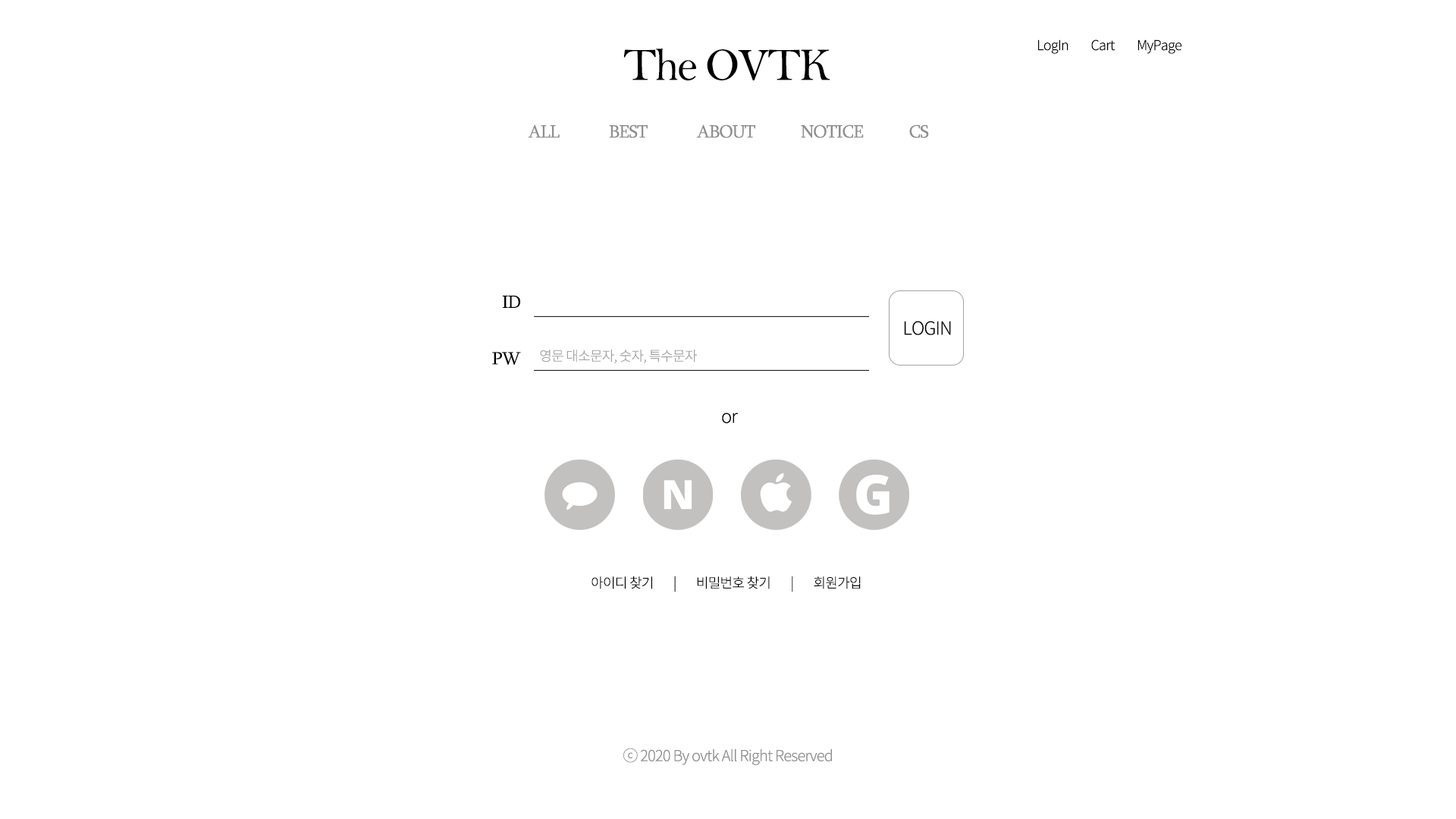
<style>
.page{position:relative;width:1456px;height:819px;background:#ffffff}
.page>*{position:absolute;margin:0}
.t1{font:13.6px "NotoSansKR-Light";letter-spacing:-0.04em;color:#000000}
.t2{font:46.8px "BellMT";letter-spacing:-0.04em;color:#000000}
.t3{font:18.2px "Sylfaen";letter-spacing:-0.04em;color:#8e8e8e}
.t4{font:18.2px "Sylfaen";letter-spacing:-0.04em;color:#000000}
.t5{font:18.2px "NotoSansKR-Light";letter-spacing:-0.04em;color:#000000}
.t6{font:13.6px "NotoSansKR-Light";letter-spacing:-0.04em;color:#a2a2a2}
.t7{font:15.2px "NotoSansKR-Light";letter-spacing:-0.04em;color:#8e8e8e}
</style>
<div class="page">
<p class="t1" style="left:1038px;top:39px;width:143px;height:15px">LogIn         Cart         MyPage</p>
<p class="t2" style="left:623px;top:49px;width:207px;height:31px">The OVTK</p>
<p class="t3" style="left:528px;top:124px;width:401px;height:14px">ALL             BEST             ABOUT            NOTICE            CS</p>
<p class="t4" style="left:502px;top:295px;width:18px;height:13px">ID</p>
<p class="t5" style="left:904px;top:321px;width:47px;height:14px">LOGIN</p>
<p class="t4" style="left:492px;top:352px;width:29px;height:13px">PW</p>
<p class="t6" style="left:540px;top:350px;width:157px;height:13px">영문 대소문자, 숫자, 특수문자</p>
<p class="t5" style="left:722px;top:413px;width:16px;height:11px">or</p>
<p class="t1" style="left:591px;top:576px;width:270px;height:16px">아이디 찾기        |        비밀번호 찾기        |        회원가입</p>
<p class="t7" style="left:623px;top:748px;width:209px;height:17px">ⓒ 2020 By ovtk All Right Reserved</p>
</div>
